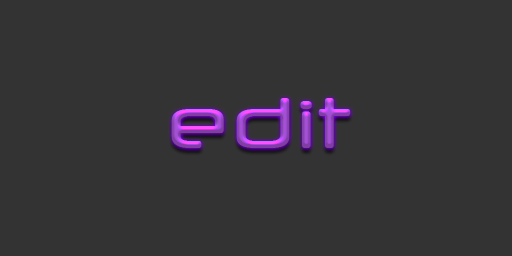
<style>
.page{position:relative;width:512px;height:256px;background:#333333}
.page>*{position:absolute;margin:0}
.t1{font:70px "NeuropolXFree";font-weight:bold}
</style>
<div class="page">
<p class="t1" style="left:171px;top:98px;width:180px;height:50px">edit</p>
</div>
